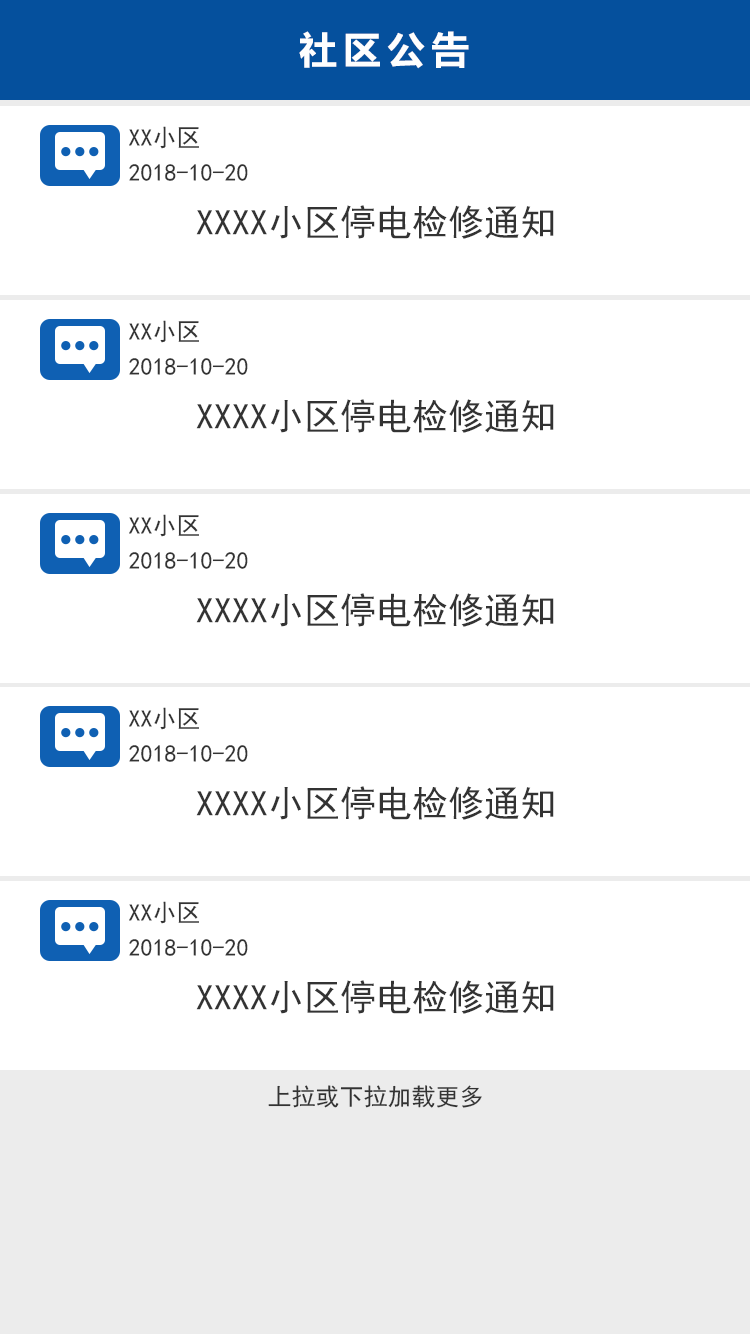
<style>
.page{position:relative;width:750px;height:1334px;background:#ffffff}
.page>*{position:absolute;margin:0}
.t1{font:40px "FZLTCHJW--GB1-0";letter-spacing:0.1em;color:#fefefe;text-transform:uppercase}
.t2{font:24px "SimHei";color:#333333;text-transform:uppercase}
.t3{font:36px "SimHei";color:#333333;text-transform:uppercase}
</style>
<div class="page">
<p class="t1" style="left:299px;top:31px;width:170px;height:38px">社区公告</p>
<p class="t2" style="left:129px;top:126px;width:70px;height:23px">XX小区</p>
<p class="t2" style="left:129px;top:164px;width:119px;height:17px">2018-10-20</p>
<p class="t3" style="left:196px;top:205px;width:358px;height:34px">XXXx小区停电检修通知</p>
<p class="t2" style="left:129px;top:320px;width:70px;height:23px">XX小区</p>
<p class="t2" style="left:129px;top:358px;width:119px;height:17px">2018-10-20</p>
<p class="t3" style="left:196px;top:399px;width:358px;height:34px">XXXx小区停电检修通知</p>
<p class="t2" style="left:129px;top:514px;width:70px;height:23px">XX小区</p>
<p class="t2" style="left:129px;top:552px;width:119px;height:17px">2018-10-20</p>
<p class="t3" style="left:196px;top:593px;width:358px;height:34px">XXXx小区停电检修通知</p>
<p class="t2" style="left:129px;top:707px;width:70px;height:23px">XX小区</p>
<p class="t2" style="left:129px;top:745px;width:119px;height:17px">2018-10-20</p>
<p class="t3" style="left:196px;top:786px;width:358px;height:34px">XXXx小区停电检修通知</p>
<p class="t2" style="left:129px;top:901px;width:70px;height:23px">XX小区</p>
<p class="t2" style="left:129px;top:939px;width:119px;height:17px">2018-10-20</p>
<p class="t3" style="left:196px;top:980px;width:358px;height:34px">XXXx小区停电检修通知</p>
<p class="t2" style="left:268px;top:1085px;width:214px;height:23px">上拉或下拉加载更多</p>
</div>
